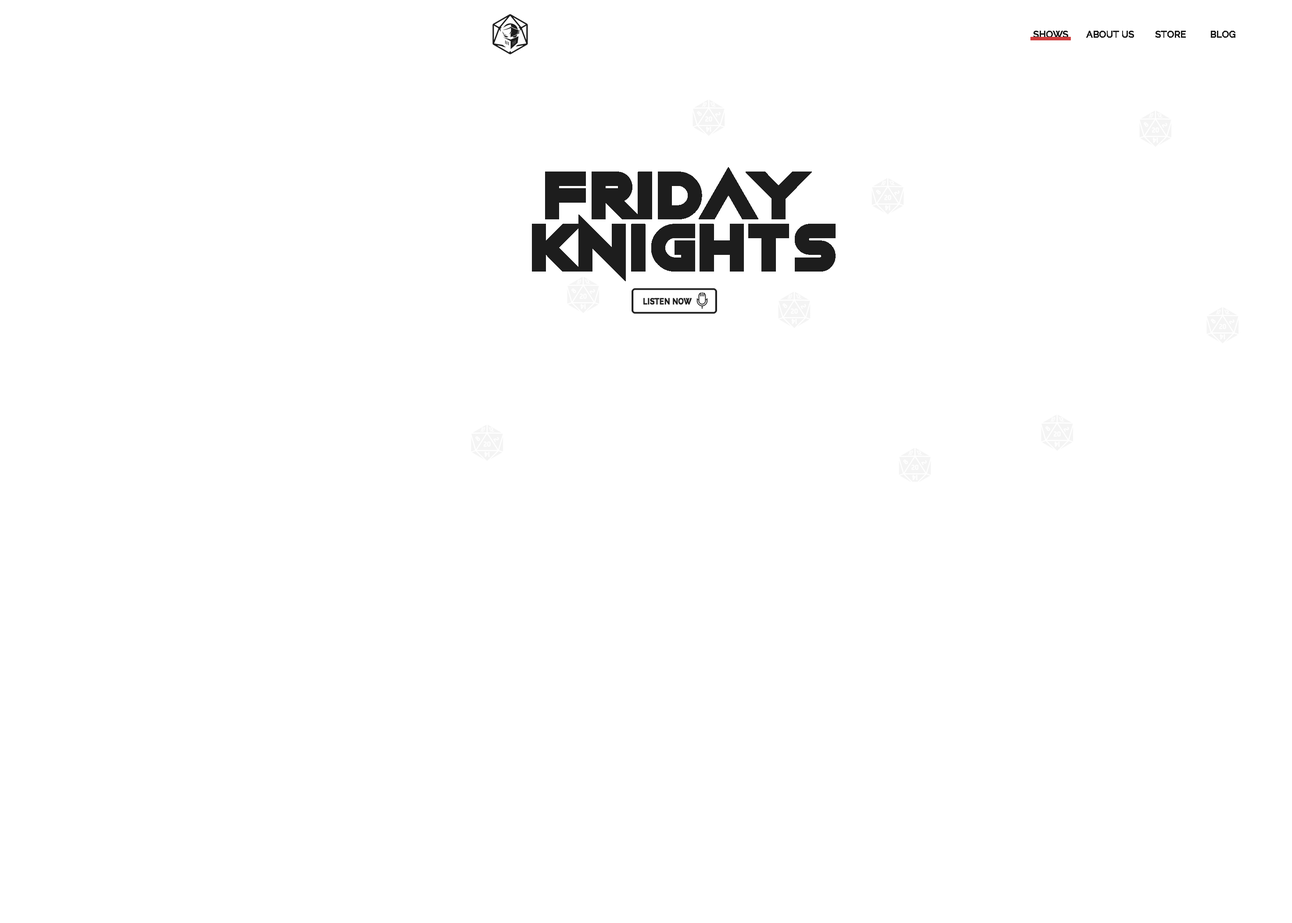
<style>
.page{position:relative;width:1292px;height:923px;background:#ffffff}
.page>*{position:absolute;margin:0}
.t1{font:9px "Raleway-Medium";color:#292929;text-transform:uppercase;font-weight:bold}
.t2{font:68.4px/52.2px "NightMachine";color:#1d1d1d;text-transform:uppercase;font-weight:bold}
</style>
<div class="page">
<p class="t1" style="left:1033px;top:31px;width:35px;height:7px">SHOWS</p>
<p class="t1" style="left:1086px;top:31px;width:48px;height:7px">ABOUT US</p>
<p class="t1" style="left:1155px;top:31px;width:31px;height:7px">STORE</p>
<p class="t1" style="left:1211px;top:31px;width:24px;height:7px">BLOG</p>
<p class="t2" style="left:532px;top:167px;width:303px;height:114px;text-align:center">friday<br> knights</p>
</div>
